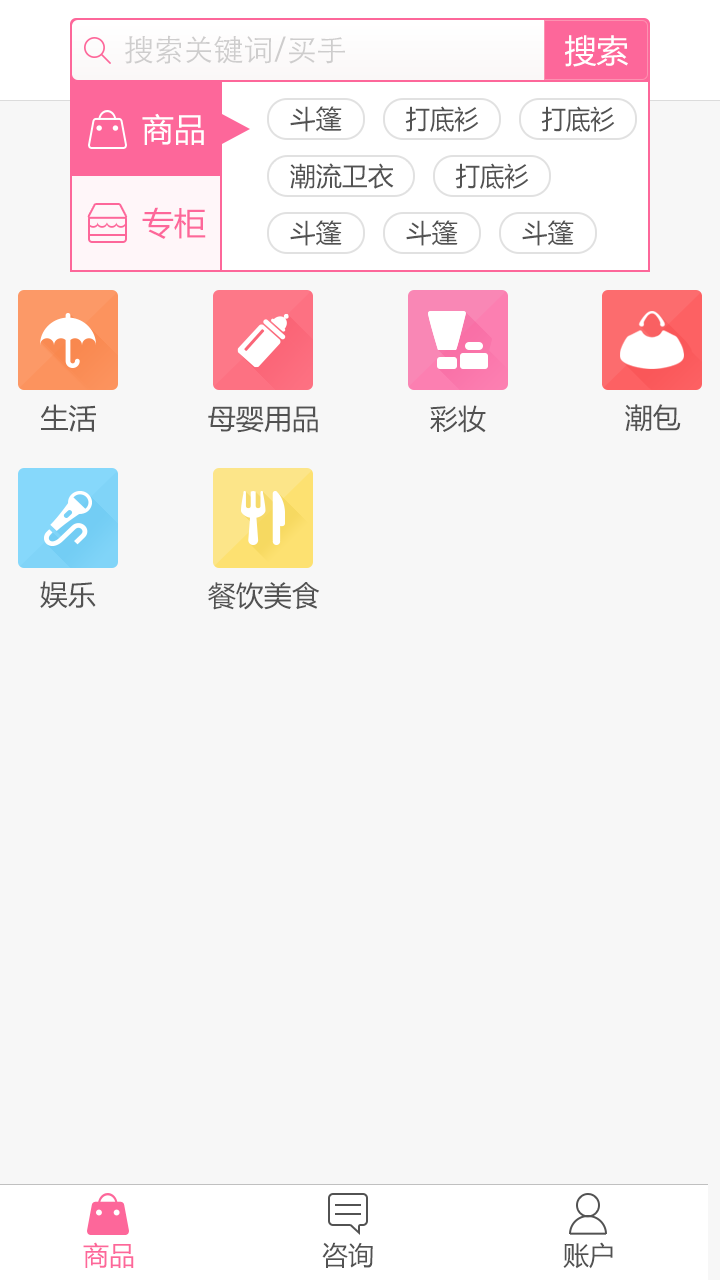
<style>
.page{position:relative;width:720px;height:1280px;background:#f7f7f7}
.page>*{position:absolute;margin:0}
.t1{font:30px "STXihei";color:#cecdcd}
.t2{font:32px "MicrosoftYaHei";color:#ffffff}
.t3{font:26px "MicrosoftYaHei";color:#525252}
.t4{font:26px "MicrosoftYaHei";color:#525252;scale:0.94 1}
.t5{font:32px "MicrosoftYaHei";color:#fd679a}
.t6{font:28px "MicrosoftYaHei";color:#525252}
.t7{font:26px "MicrosoftYaHei";color:#fd679a}
</style>
<div class="page">
<p class="t1" style="left:125px;top:35px;width:220px;height:29px">搜索关键词/买手</p>
<p class="t2" style="left:565px;top:35px;width:63px;height:32px">搜索</p>
<p class="t2" style="left:142px;top:113px;width:62px;height:32px">商品</p>
<p class="t3" style="left:290px;top:106px;width:52px;height:26px">斗篷</p>
<p class="t4" style="left:405px;top:106px;width:74px;height:26px">打底衫</p>
<p class="t4" style="left:541px;top:106px;width:74px;height:26px">打底衫</p>
<p class="t3" style="left:290px;top:163px;width:104px;height:26px">潮流卫衣</p>
<p class="t4" style="left:455px;top:163px;width:74px;height:26px">打底衫</p>
<p class="t5" style="left:142px;top:207px;width:64px;height:32px">专柜</p>
<p class="t3" style="left:290px;top:220px;width:52px;height:26px">斗篷</p>
<p class="t3" style="left:406px;top:220px;width:52px;height:26px">斗篷</p>
<p class="t3" style="left:522px;top:220px;width:52px;height:26px">斗篷</p>
<p class="t6" style="left:41px;top:404px;width:55px;height:28px">生活</p>
<p class="t6" style="left:208px;top:406px;width:110px;height:27px">母婴用品</p>
<p class="t6" style="left:430px;top:405px;width:56px;height:28px">彩妆</p>
<p class="t6" style="left:625px;top:404px;width:56px;height:28px">潮包</p>
<p class="t6" style="left:40px;top:581px;width:56px;height:28px">娱乐</p>
<p class="t6" style="left:208px;top:582px;width:112px;height:28px">餐饮美食</p>
<p class="t7" style="left:83px;top:1242px;width:51px;height:26px">商品</p>
<p class="t3" style="left:322px;top:1242px;width:51px;height:26px">咨询</p>
<p class="t3" style="left:563px;top:1242px;width:50px;height:27px">账户</p>
</div>
